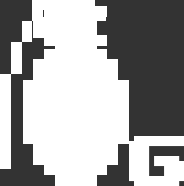
<style>
.page{position:relative;width:184px;height:186px;background:#ffffff}
.page>*{position:absolute;margin:0}
.t1{font:100px "UpheavalPro-Regular";color:#ffffff}
</style>
<div class="page">
<p class="t1" style="left:129px;top:136px;width:56px;height:50px">G</p>
</div>
